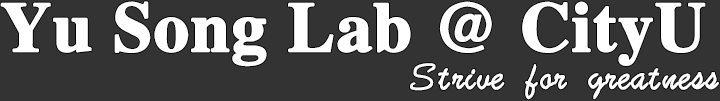
<style>
.page{position:relative;width:720px;height:101px;background:#333333}
.page>*{position:absolute;margin:0}
.t1{font:70.1px "minisong-regular";color:#ffffff;font-weight:bold}
.t2{font:40.1px "STXingkaiTC-Light";color:#ffffff;font-weight:bold}
</style>
<div class="page">
<p class="t1" style="left:0px;top:1px;width:706px;height:66px">Yu Song Lab @ CityU</p>
<p class="t2" style="left:410px;top:63px;width:309px;height:37px">Strive for greatness</p>
</div>
